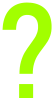
<style>
.page{position:relative;width:56px;height:100px;background:#ffffff}
.page>*{position:absolute;margin:0}
.t1{font:133.3px "Bahnschrift";color:#a2ff00}
</style>
<div class="page">
<p class="t1" style="left:2px;top:2px;width:50px;height:96px">?</p>
</div>
